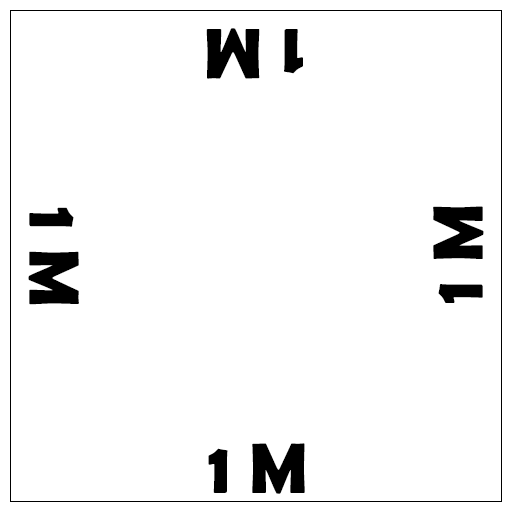
<style>
.page{position:relative;width:512px;height:512px;background:#ffffff}
.page>*{position:absolute;margin:0}
.t1{font:72px "BerlinSansFBDemi-Bold";color:#000000}
</style>
<div class="page">
<p class="t1" style="left:206px;top:28px;width:97px;height:51px;rotate:180deg">1 M</p>
<p class="t1" style="left:28px;top:207px;width:51px;height:98px;rotate:90deg">1 M</p>
<p class="t1" style="left:433px;top:206px;width:51px;height:97px;rotate:-90deg">1 M</p>
<p class="t1" style="left:208px;top:443px;width:97px;height:51px">1 M</p>
</div>
